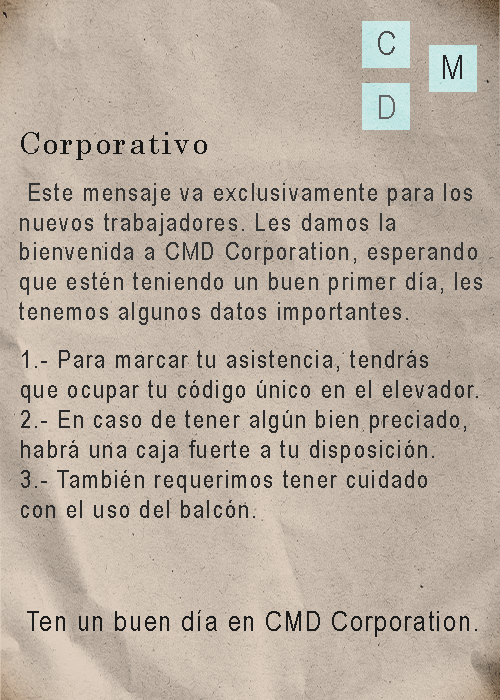
<style>
.page{position:relative;width:500px;height:700px}
.page>*{position:absolute;margin:0}
.t1{font:33.2px "ArialNarrow";letter-spacing:0.075em;color:#4c4c4c}
.t2{font:33.2px "ArialNarrow";letter-spacing:0.075em;color:#252424}
.t3{font:33.2px "ArialNarrow";letter-spacing:0.075em;color:#646464}
.t4{font:30.4px "Century";letter-spacing:0.075em;color:#161616}
.t5{font:24.9px "ArialNarrow";letter-spacing:0.075em;color:#343333}
.t6{font:24.9px "ArialNarrow";letter-spacing:0.075em;color:#2a2a2a}
.t7{font:27.6px "ArialNarrow";letter-spacing:0.075em;color:#1b1b1b}
</style>
<div class="page">
<p class="t1" style="left:378px;top:31px;width:17px;height:24px">C</p>
<p class="t2" style="left:443px;top:55px;width:19px;height:24px">M</p>
<p class="t3" style="left:379px;top:95px;width:16px;height:24px">D</p>
<p class="t4" style="left:21px;top:132px;width:186px;height:28px">Corporativo</p>
<p class="t5" style="left:19px;top:183px;width:463px;height:142px">Este mensaje va exclusivamente para los<br>nuevos trabajadores. Les damos la <br>bienvenida a CMD Corporation, esperando<br>que estén teniendo un buen primer día, les<br>tenemos algunos datos importantes.</p>
<p class="t6" style="left:21px;top:350px;width:457px;height:168px">1.- Para marcar tu asistencia, tendrás <br>que ocupar tu código único en el elevador.<br>2.- En caso de tener algún bien preciado, <br>habrá una caja fuerte a tu disposición.<br>3.- También requerimos tener cuidado <br>con el uso del balcón.</p>
<p class="t7" style="left:27px;top:610px;width:450px;height:27px">Ten un buen día en CMD Corporation.</p>
</div>
